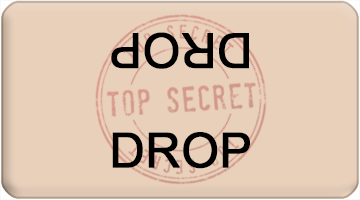
<style>
.page{position:relative;width:360px;height:200px;background:#e8d0bb}
.page>*{position:absolute;margin:0}
.t1{font:48px "ArialMT";color:#000000;font-weight:bold}
</style>
<div class="page">
<p class="t1" style="left:111px;top:32px;width:138px;height:37px;rotate:180deg">DROP</p>
<p class="t1" style="left:112px;top:132px;width:138px;height:37px">DROP</p>
</div>
